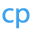
<style>
.page{position:relative;width:32px;height:32px;background:#ffffff}
.page>*{position:absolute;margin:0}
.t1{font:28.5px "MyriadPro-Regular";color:#3ca1ee}
</style>
<div class="page">
<p class="t1" style="left:2px;top:8px;width:28px;height:21px">cp</p>
</div>
